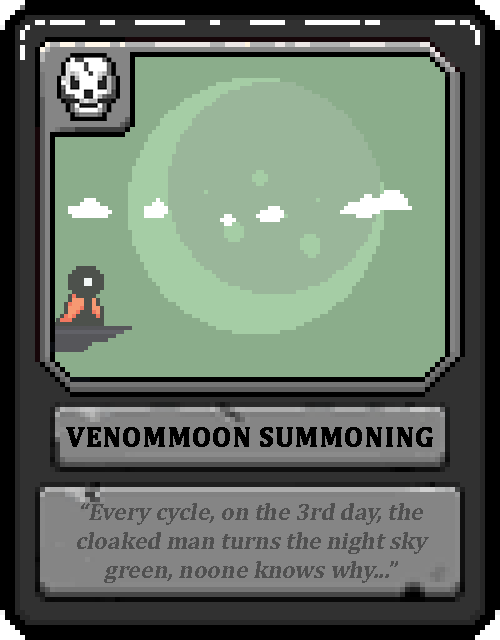
<style>
.page{position:relative;width:500px;height:640px}
.page>*{position:absolute;margin:0}
.t1{font:28px "Cambria-Bold";color:#000000;text-transform:uppercase;font-weight:bold}
.t2{font:24px "Cambria-Bold";color:#505050;font-style:italic}
</style>
<div class="page">
<p class="t1" style="left:66px;top:427px;width:367px;height:20px">Venommoon Summoning</p>
<p class="t2" style="left:77px;top:503px;width:352px;height:80px;text-align:center">“Every cycle, on the 3rd day, the cloaked man turns the night sky green, noone knows why...”</p>
</div>
